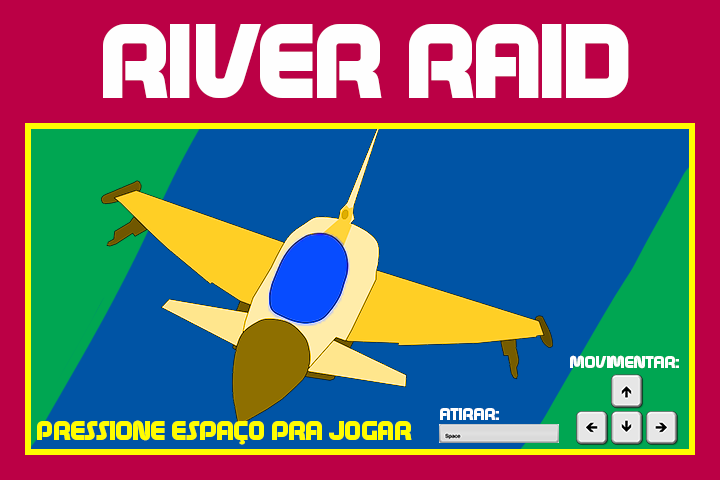
<style>
.page{position:relative;width:720px;height:480px;background:#0054a5}
.page>*{position:absolute;margin:0}
.t1{font:105.5px "Age";color:#fefefe}
.t2{font:17.1px "Age";color:#fefefe}
.t3{font:27px "Age";color:#fffc00}
</style>
<div class="page">
<p class="t1" style="left:103px;top:24px;width:526px;height:74px">RIVER RAID</p>
<p class="t2" style="left:570px;top:355px;width:109px;height:14px">MOVIMENTAR:</p>
<p class="t2" style="left:440px;top:408px;width:59px;height:12px">ATIRAR:</p>
<p class="t3" style="left:37px;top:420px;width:375px;height:25px">PRESSIONE ESPAÇO PRA JOGAR</p>
</div>
